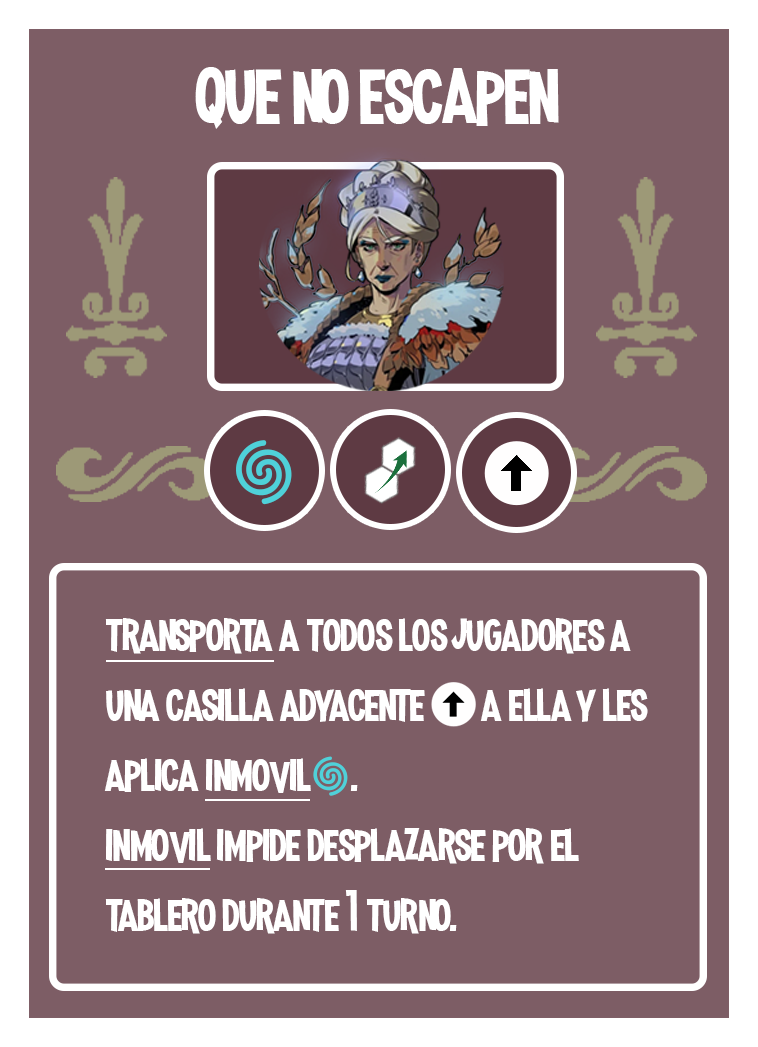
<style>
.page{position:relative;width:758px;height:1047px;background:#7d5d65}
.page>*{position:absolute;margin:0}
.t1{font:100px "MadnessHyperactive";color:#ffffff}
.t2{font:58.3px "MadnessHyperactive";color:#ffffff}
.t3{font:41.7px "EmojiOneColor";color:#ffffff}
</style>
<div class="page">
<p class="t1" style="left:195px;top:67px;width:364px;height:62px">que no escapen</p>
<p class="t2" style="left:104px;top:618px;width:544px;height:316px">transporta a todos los jugadores a una casilla adyacente       a ella y les aplica inmovil<span class="t3">🌀</span>.<br>inmovil impide desplazarse por el tablero durante 1 turno.</p>
</div>
